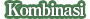
<style>
.page{position:relative;width:90px;height:19px;background:#ffffff}
.page>*{position:absolute;margin:0}
.t1{font:17px "RyuminPro-ExBold";letter-spacing:-0.06em;color:#ffffff}
</style>
<div class="page">
<p class="t1" style="left:7px;top:3px;width:77px;height:14px">Kombinasi</p>
<p class="t1" style="left:7px;top:3px;width:77px;height:14px">Kombinasi</p>
</div>
